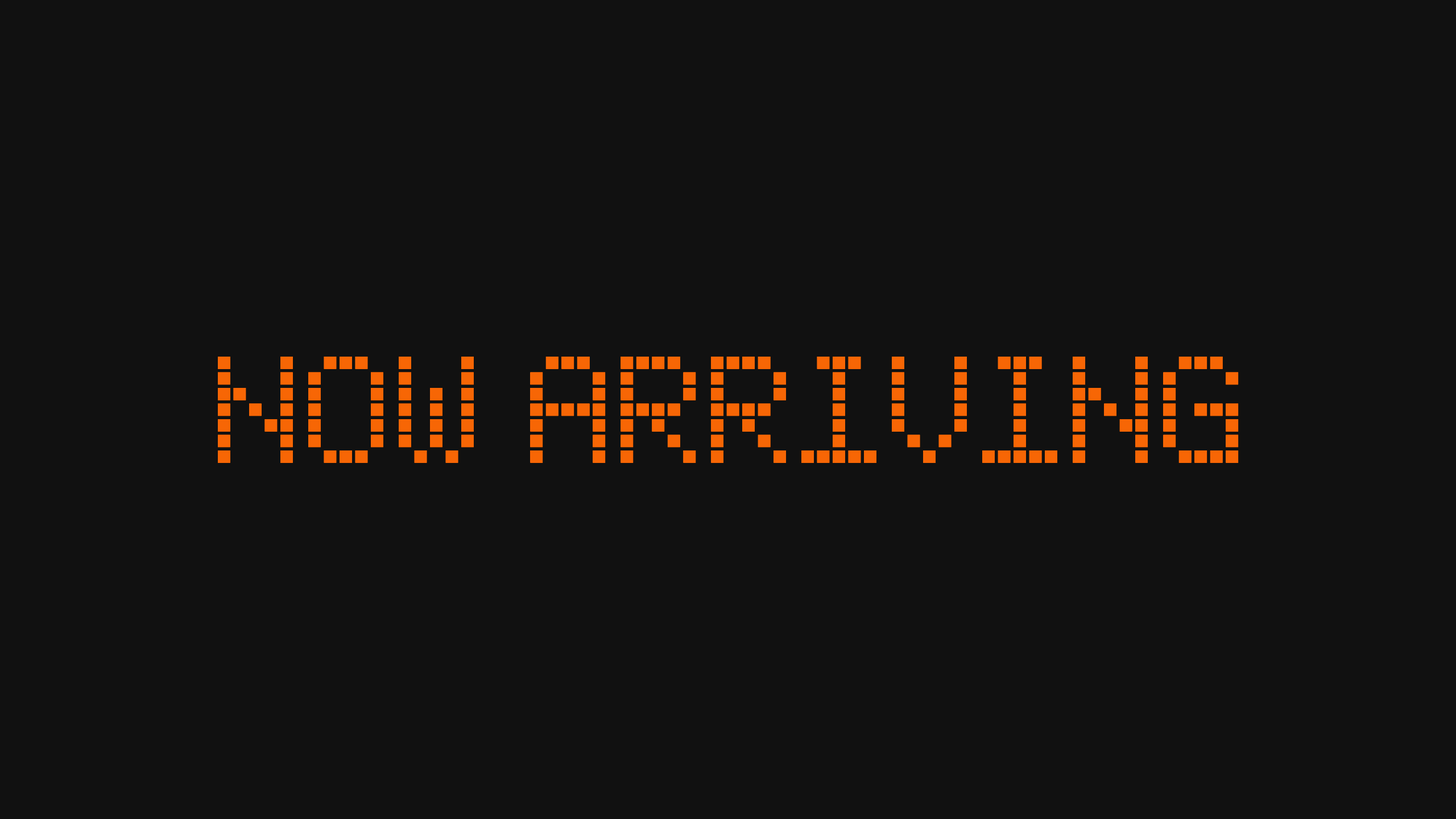
<style>
.page{position:relative;width:1456px;height:819px;background:#111111}
.page>*{position:absolute;margin:0}
.t1{font:125.1px "SubwayTicker";color:#f76605}
</style>
<div class="page">
<p class="t1" style="left:217px;top:356px;width:1022px;height:107px">NOW ARRIVING</p>
</div>
